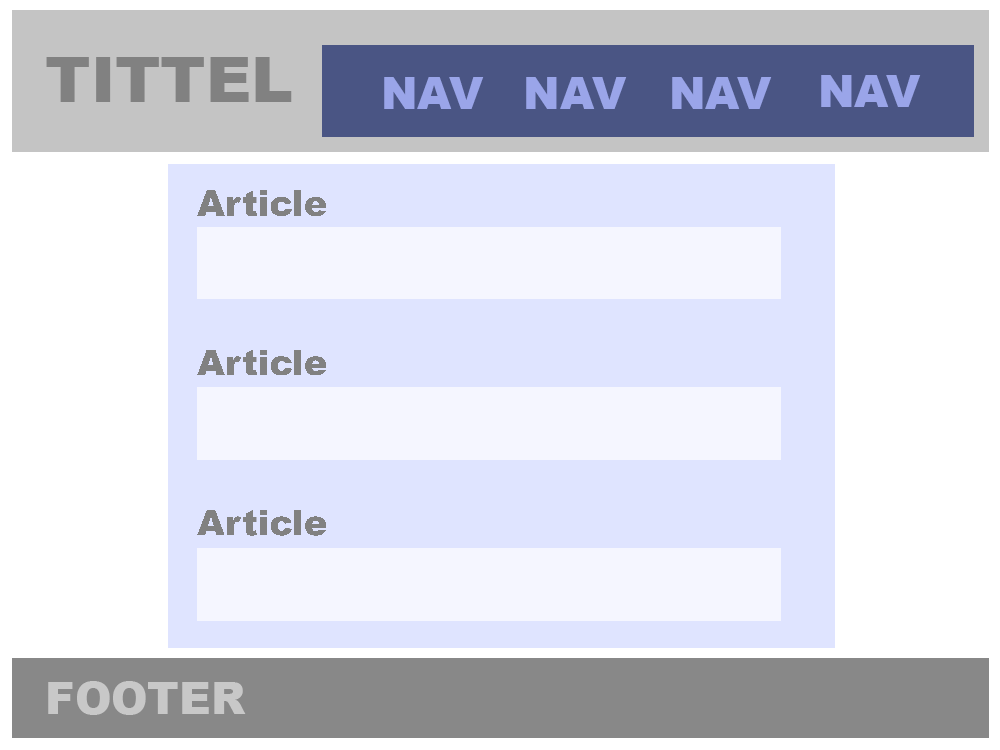
<style>
.page{position:relative;width:1000px;height:750px;background:#ffffff}
.page>*{position:absolute;margin:0}
.t1{font:62.9px "Arial-Black";color:#818181}
.t2{font:44.1px "Arial-Black";color:#9aa5e9}
.t3{font:44.1px "Arial-Black";color:#c8c8c8}
</style>
<div class="page">
<p class="t1" style="left:46px;top:57px;width:246px;height:45px">TITTEL</p>
<p class="t2" style="left:384px;top:77px;width:100px;height:32px">NAV</p>
<p class="t2" style="left:526px;top:77px;width:101px;height:32px">NAV</p>
<p class="t2" style="left:672px;top:77px;width:100px;height:32px">NAV</p>
<p class="t2" style="left:821px;top:75px;width:100px;height:32px">NAV</p>
<p class="t3" style="left:48px;top:681px;width:198px;height:34px">FOOTER</p>
</div>
